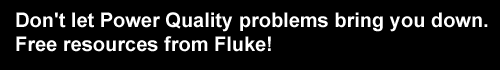
<style>
.page{position:relative;width:500px;height:70px;background:#000000}
.page>*{position:absolute;margin:0}
.t1{font:20px "Arial-BoldMT";color:#ffffff}
</style>
<div class="page">
<p class="t1" style="left:16px;top:12px;width:472px;height:40px">Don't let Power Quality problems bring you down.<br>Free resources from Fluke!</p>
</div>
